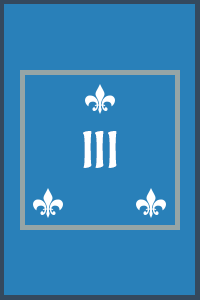
<style>
.page{position:relative;width:200px;height:300px;background:#2980b9}
.page>*{position:absolute;margin:0}
.t1{font:50.4px "Aladin-Regular";color:#ffffff}
</style>
<div class="page">
<p class="t1" style="left:83px;top:131px;width:34px;height:37px">III</p>
</div>
